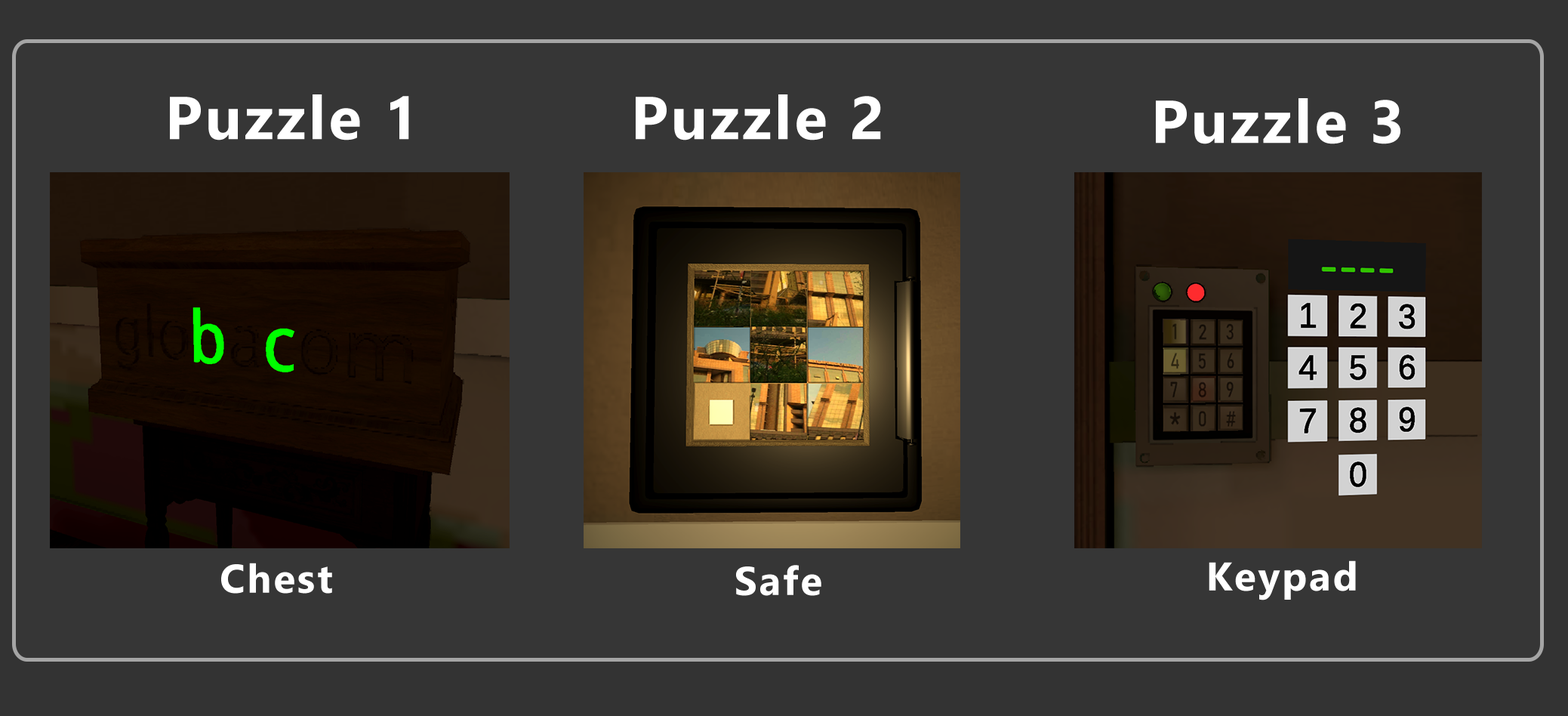
<style>
.page{position:relative;width:1568px;height:716px;background:#363636}
.page>*{position:absolute;margin:0}
.t1{font:60.4px "Gadugi-Bold";letter-spacing:0.05em;color:#ffffff}
.t2{font:39.8px "Gadugi-Bold";letter-spacing:0.05em;color:#ffffff}
</style>
<div class="page">
<p class="t1" style="left:170px;top:94px;width:239px;height:46px">Puzzle 1</p>
<p class="t1" style="left:636px;top:94px;width:245px;height:46px">Puzzle 2</p>
<p class="t1" style="left:1156px;top:98px;width:244px;height:46px">Puzzle 3</p>
<p class="t2" style="left:221px;top:562px;width:111px;height:31px">Chest</p>
<p class="t2" style="left:736px;top:565px;width:85px;height:31px">Safe</p>
<p class="t2" style="left:1209px;top:560px;width:147px;height:40px">Keypad</p>
</div>
